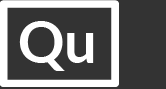
<style>
.page{position:relative;width:166px;height:89px;background:#333333}
.page>*{position:absolute;margin:0}
.t1{font:58.4px "Lato-Bold";color:#ffffff}
</style>
<div class="page">
<p class="t1" style="left:19px;top:21px;width:75px;height:50px">Qu</p>
</div>
